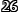
<style>
.page{position:relative;width:18px;height:12px;background:#ffffff}
.page>*{position:absolute;margin:0}
.t1{font:17px "Perpetua-Bold";color:#ffffff}
</style>
<div class="page">
<p class="t1" style="left:2px;top:1px;width:15px;height:10px">26</p>
</div>
